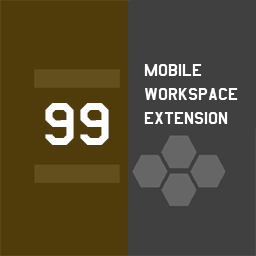
<style>
.page{position:relative;width:256px;height:256px;background:#503b0a}
.page>*{position:absolute;margin:0}
.t1{font:20px "AmarilloUSAF";color:#ffffff}
.t2{font:70px "AmarilloUSAF";color:#ffffff}
</style>
<div class="page">
<p class="t1" style="left:144px;top:64px;width:94px;height:60px">mobile<br>workspace<br>extension</p>
<p class="t2" style="left:45px;top:103px;width:64px;height:42px">99</p>
</div>
